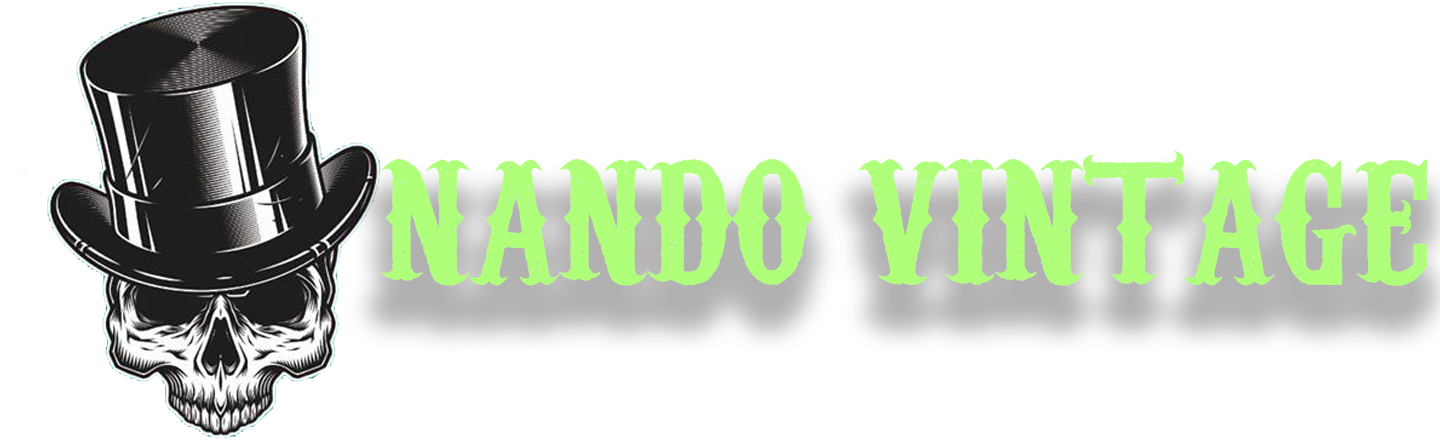
<style>
.page{position:relative;width:1440px;height:440px;background:#ffffff}
.page>*{position:absolute;margin:0}
.t1{font:166.8px "CarnivaleeFreakshow";color:#afff7a;text-transform:uppercase}
</style>
<div class="page">
<p class="t1" style="left:381px;top:150px;width:1047px;height:136px">nando vintage</p>
</div>
